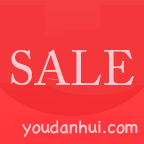
<style>
.page{position:relative;width:144px;height:144px;background:#f4373b}
.page>*{position:absolute;margin:0}
.t1{font:48px "ACaslonPro-Regular";color:#ffc9ce}
.t2{font:18px "Chalkboard";color:#ffc9ce}
</style>
<div class="page">
<p class="t1" style="left:11px;top:49px;width:123px;height:36px">SALE</p>
<p class="t2" style="left:22px;top:120px;width:116px;height:17px">youdanhui.com</p>
</div>
